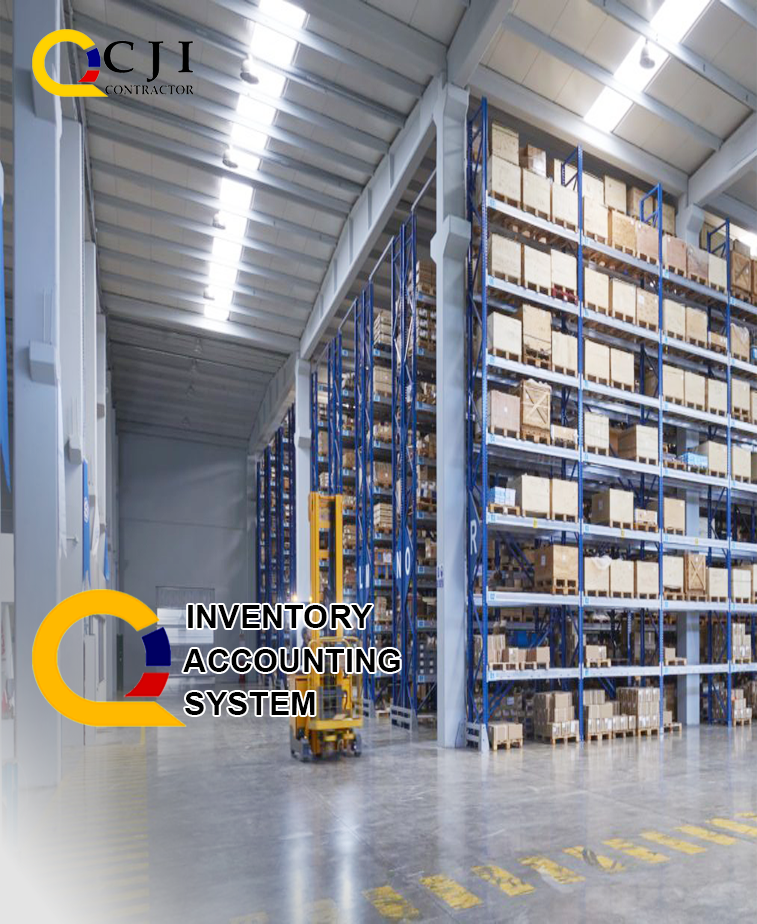
<style>
.page{position:relative;width:757px;height:924px}
.page>*{position:absolute;margin:0}
.t1{font:32.4px "Arial-BoldMT";color:#000000}
</style>
<div class="page">
<p class="t1" style="left:188px;top:605px;width:185px;height:23px">INVENTORY</p>
<p class="t1" style="left:183px;top:649px;width:217px;height:23px">ACCOUNTING</p>
<p class="t1" style="left:185px;top:692px;width:130px;height:23px">SYSTEM</p>
</div>
